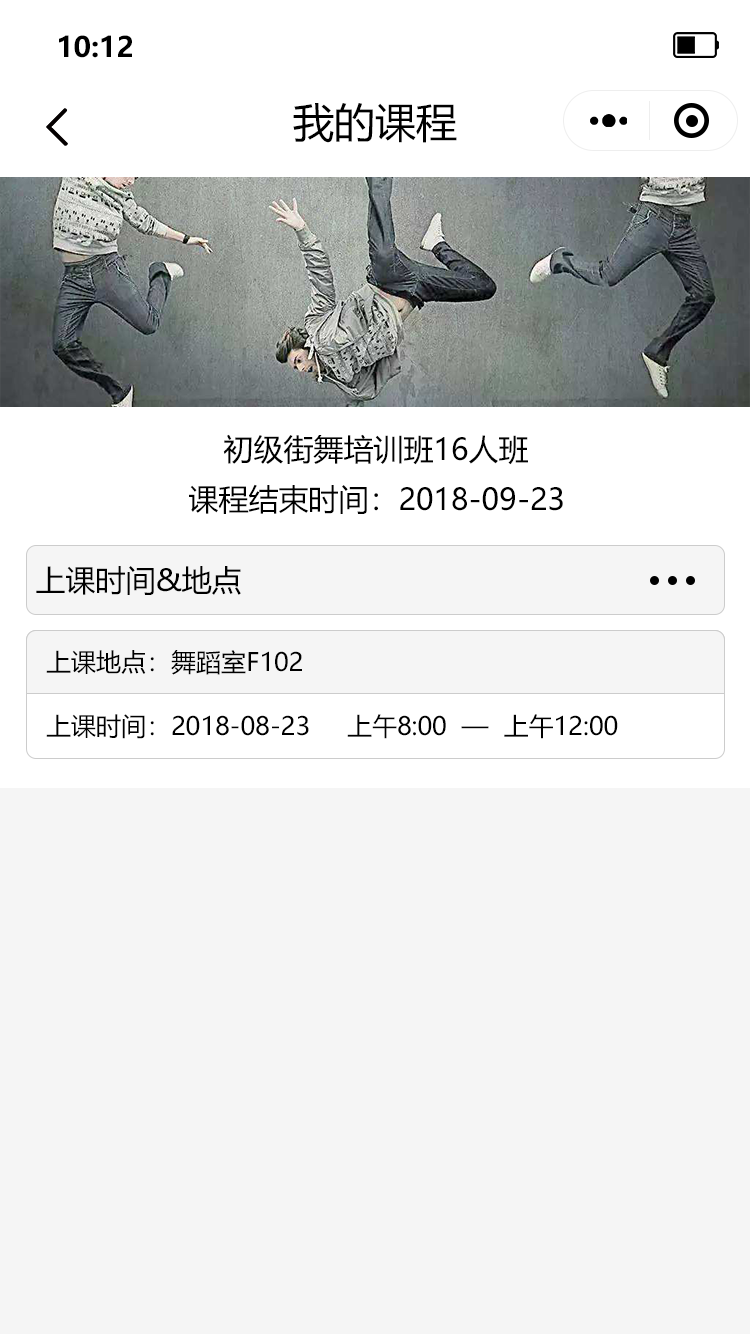
<style>
.page{position:relative;width:750px;height:1334px;background:#f5f5f5}
.page>*{position:absolute;margin:0}
.t1{font:28.1px "MicrosoftYaHei-Bold";color:#000000}
.t2{font:41px "MicrosoftYaHei";color:#000000}
.t3{font:30px "MicrosoftYaHei";color:#000000}
.t4{font:25px "MicrosoftYaHei";color:#000000}
</style>
<div class="page">
<p class="t1" style="left:59px;top:35px;width:73px;height:23px">10:12</p>
<p class="t2" style="left:293px;top:103px;width:164px;height:40px">我的课程</p>
<p class="t3" style="left:223px;top:434px;width:305px;height:31px">初级街舞培训班16人班</p>
<p class="t3" style="left:189px;top:484px;width:374px;height:30px">课程结束时间：2018-09-23</p>
<p class="t3" style="left:36px;top:566px;width:205px;height:29px">上课时间&amp;地点</p>
<p class="t4" style="left:46px;top:650px;width:256px;height:25px">上课地点：舞蹈室F102</p>
<p class="t4" style="left:46px;top:714px;width:572px;height:25px">上课时间：2018-08-23     上午8:00  —  上午12:00</p>
</div>
